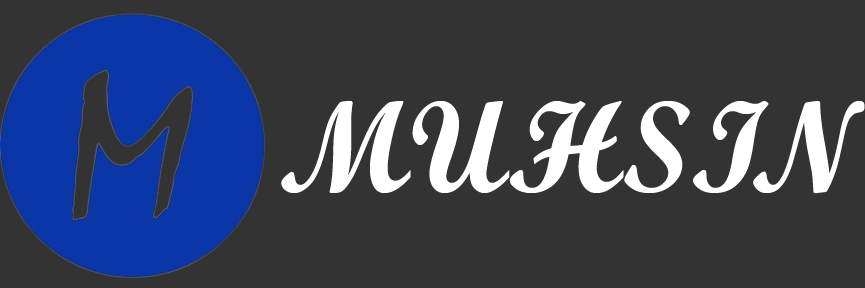
<style>
.page{position:relative;width:865px;height:288px;background:#333333}
.page>*{position:absolute;margin:0}
.t1{font:130px "ScriptMTBold";color:#ffffff}
</style>
<div class="page">
<p class="t1" style="left:281px;top:101px;width:584px;height:93px">MUHSIN</p>
</div>
